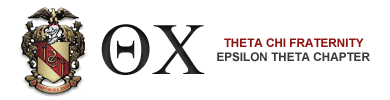
<style>
.page{position:relative;width:390px;height:100px;background:#ffffff}
.page>*{position:absolute;margin:0}
.t1{font:73.7px "TimesNewRomanPSMT";color:#363636}
.t2{font:11.7px "Arial-BoldMT";color:#8f1311}
.t3{font:11.7px "Arial-BoldMT";color:#393939}
</style>
<div class="page">
<p class="t1" style="left:101px;top:24px;width:104px;height:51px">ΘX</p>
<p class="t2" style="left:224px;top:38px;width:140px;height:9px">THETA CHI FRATERNITY</p>
<p class="t3" style="left:217px;top:52px;width:153px;height:10px">EPSILON THETA CHAPTER</p>
</div>
